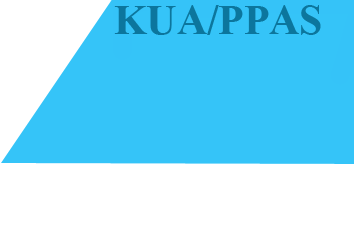
<style>
.page{position:relative;width:354px;height:236px;background:#35c4f8}
.page>*{position:absolute;margin:0}
.t1{font:41.7px "TimesNewRomanPS-BoldMT";color:#0c769d}
</style>
<div class="page">
<p class="t1" style="left:114px;top:5px;width:207px;height:30px">KUA/PPAS</p>
</div>
